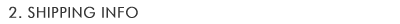
<style>
.page{position:relative;width:400px;height:24px;background:#ffffff}
.page>*{position:absolute;margin:0}
.t1{font:14.7px "FuturaBT-Light";letter-spacing:0.025em;color:#363636;text-transform:uppercase;font-weight:bold}
</style>
<div class="page">
<p class="t1" style="left:9px;top:6px;width:129px;height:12px">2. shipping INFO</p>
</div>
